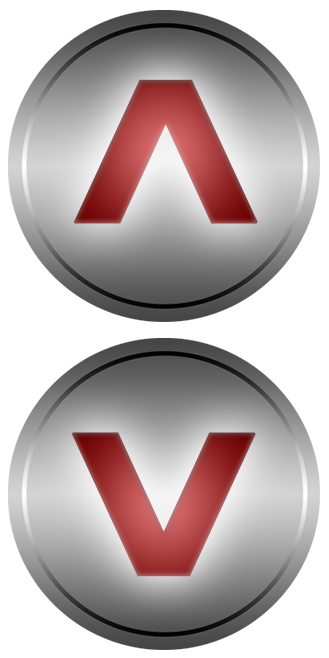
<style>
.page{position:relative;width:329px;height:658px;background:#ffffff}
.page>*{position:absolute;margin:0}
.t1{font:367.1px "HelveticaNeueLTStd-Bd";font-weight:bold;scale:1.03 1}
</style>
<div class="page">
<p class="t1" style="left:73px;top:79px;width:185px;height:145px">^</p>
<p class="t1" style="left:71px;top:432px;width:185px;height:145px;rotate:180deg">^</p>
</div>
